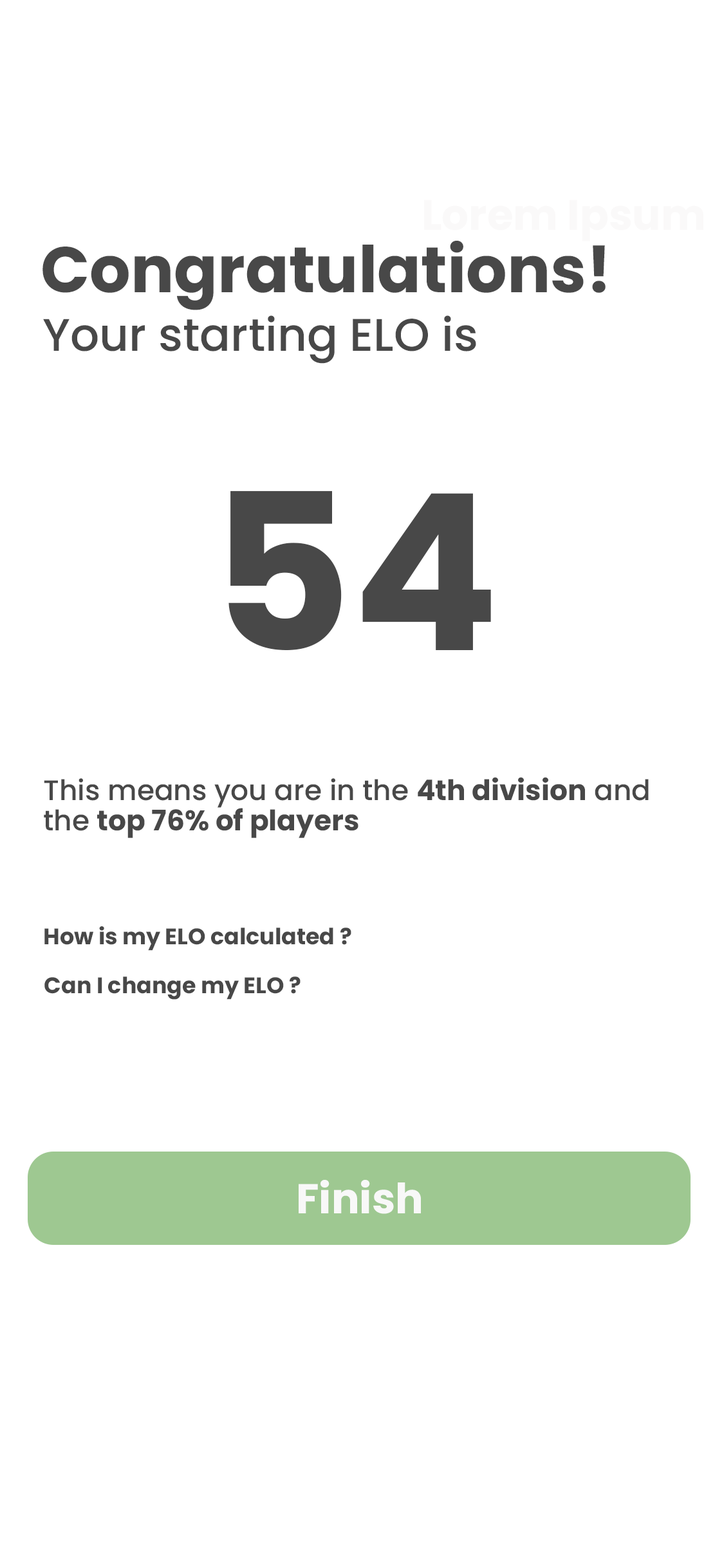
<style>
.page{position:relative;width:724px;height:1568px;background:#ffffff}
.page>*{position:absolute;margin:0}
.t1{font:42.5px "Poppins-Bold";color:#faf9f9}
.t2{font:64.4px "Poppins-Bold";color:#484848}
.t3{font:45.7px "Poppins-Medium";color:#484848}
.t4{font:217.6px "Poppins-Bold";color:#484848}
.t5{font:28.3px/30.3px "Poppins-Medium";color:#484848}
.t6{font:28.3px/30.3px "Poppins-Bold";color:#484848}
.t7{font:22.5px "Poppins-Bold";color:#484848}
.t8{font:41.8px "Poppins-Bold";color:#f8f8f8}
</style>
<div class="page">
<p class="t1" style="left:424px;top:200px;width:280px;height:41px">Lorem Ipsum</p>
<p class="t2" style="left:42px;top:241px;width:564px;height:69px">Congratulations!</p>
<p class="t3" style="left:43px;top:315px;width:433px;height:49px">Your starting ELO is</p>
<p class="t4" style="left:229px;top:490px;width:262px;height:160px">54</p>
<p class="t5" style="left:44px;top:777px;width:605px;height:61px">This means you are in the <span class="t6">4th division</span> and <br>the <span class="t6">top 76% of players</span></p>
<p class="t7" style="left:44px;top:926px;width:307px;height:25px">How is my ELO calculated ?</p>
<p class="t7" style="left:44px;top:976px;width:257px;height:24px">Can I change my ELO ?</p>
<p class="t8" style="left:299px;top:1180px;width:122px;height:34px">Finish</p>
</div>
